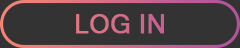
<style>
.page{position:relative;width:240px;height:48px;background:#333333}
.page>*{position:absolute;margin:0}
.t1{font:27.3px "MicrosoftSansSerif";color:#d26b89;font-weight:bold;scale:0.95 1}
</style>
<div class="page">
<p class="t1" style="left:76px;top:14px;width:88px;height:20px">LOG IN</p>
</div>
